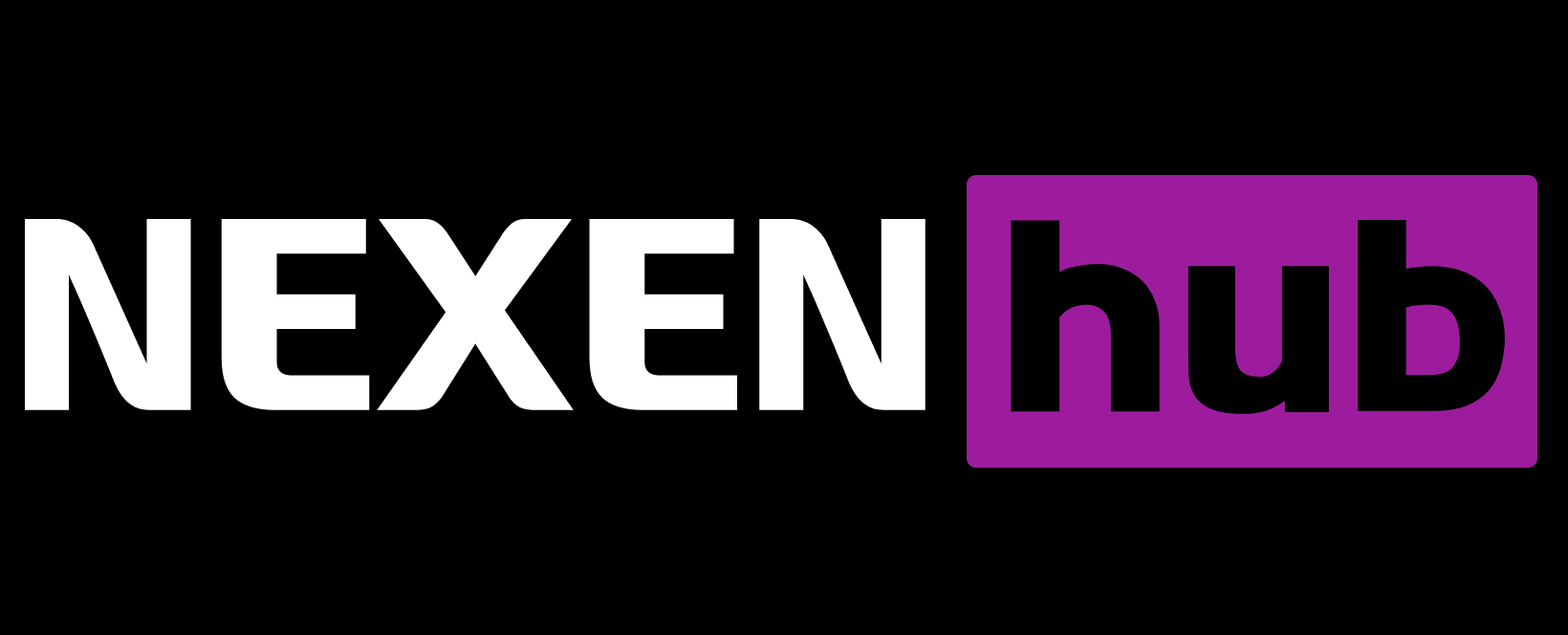
<style>
.page{position:relative;width:1568px;height:635px;background:#000000}
.page>*{position:absolute;margin:0}
.t1{font:239px "Nexen_B";color:#ffffff}
.t2{font:239px "Nexen_B";color:#000000}
</style>
<div class="page">
<p class="t1" style="left:24px;top:219px;width:902px;height:191px">NEXEN</p>
<p class="t2" style="left:1011px;top:220px;width:495px;height:194px">hub</p>
</div>
